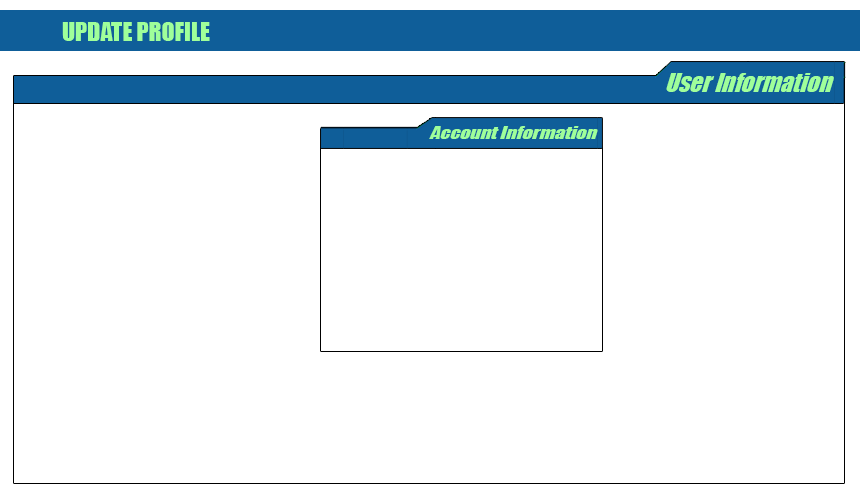
<style>
.page{position:relative;width:860px;height:500px;background:#ffffff}
.page>*{position:absolute;margin:0}
.t1{font:24px "Impact";color:#9fff9a}
.t2{font:25.1px "Impact";color:#9fff9a;scale:0.96 1}
.t3{font:17px "Impact";color:#9fff9a;scale:1.17 1}
</style>
<div class="page">
<p class="t1" style="left:62px;top:22px;width:148px;height:19px">UPDATE PROFILE</p>
<p class="t2" style="left:666px;top:73px;width:168px;height:19px">User Information</p>
<p class="t3" style="left:429px;top:126px;width:169px;height:13px">Account Information</p>
</div>
